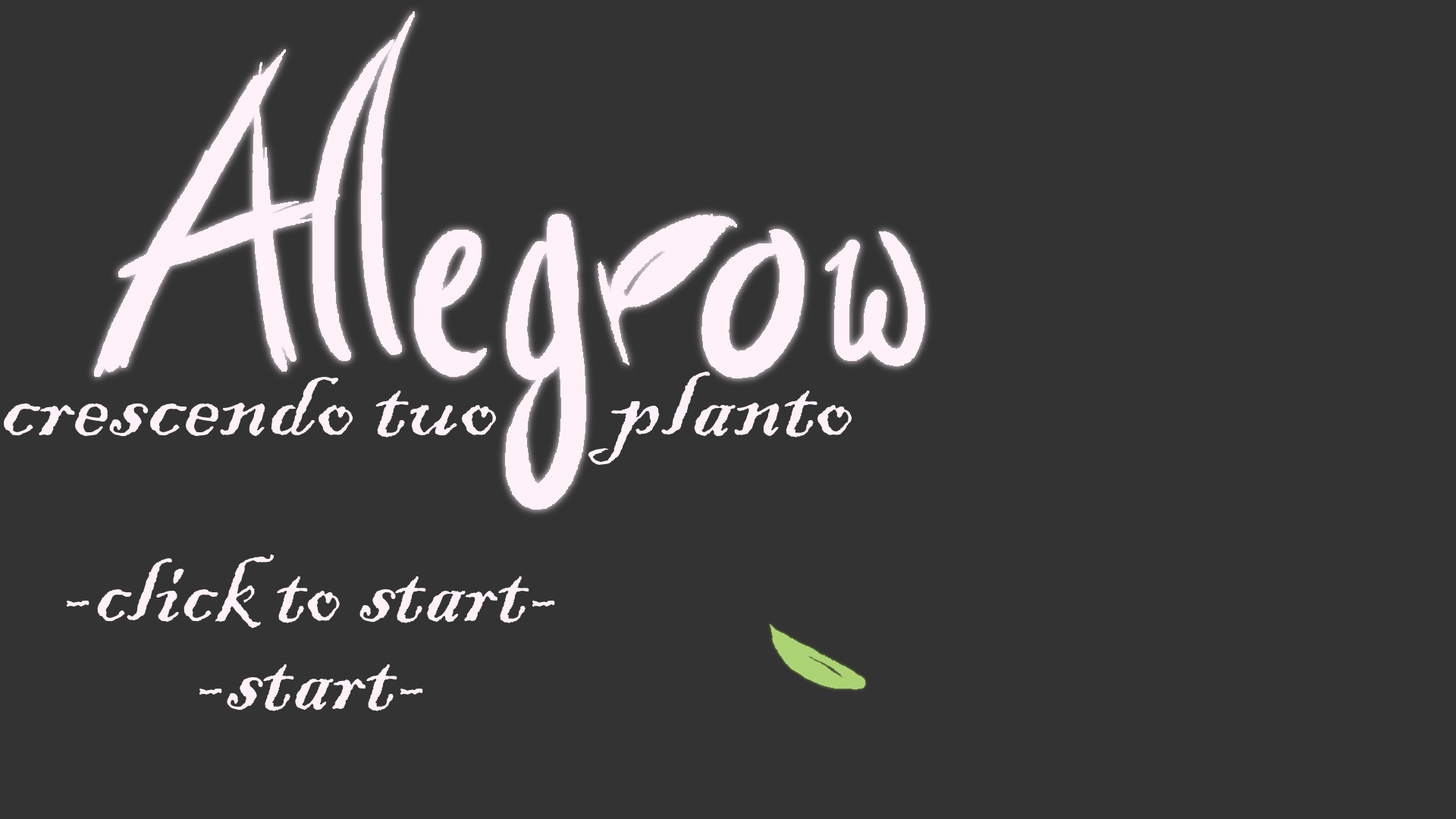
<style>
.page{position:relative;width:1456px;height:819px;background:#333333}
.page>*{position:absolute;margin:0}
.t1{font:109.8px "BlackadderITC-Regular";color:#fff1f8;scale:1.07 1}
.t2{font:109.2px/88.3px "BlackadderITC-Regular";color:#fff1f8}
</style>
<div class="page">
<p class="t1" style="left:4px;top:372px;width:848px;height:93px">crescendo tuo      planto</p>
<p class="t2" style="left:66px;top:554px;width:489px;height:157px;text-align:center">-click to start-<br>-start-</p>
</div>
